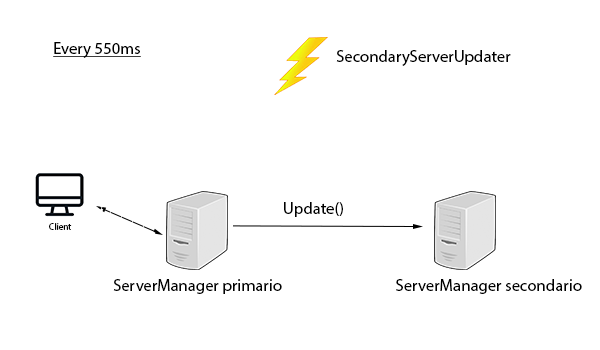
<style>
.page{position:relative;width:600px;height:350px;background:#ffffff}
.page>*{position:absolute;margin:0}
.t1{font:16.7px "MyriadPro-Regular";color:#000000;text-decoration:underline}
.t2{font:16.7px "MyriadPro-Regular";color:#000000}
.t3{font:9.1px "MyriadPro-Regular";color:#000000}
</style>
<div class="page">
<p class="t1" style="left:53px;top:42px;width:88px;height:16px">Every 550ms</p>
<p class="t2" style="left:336px;top:50px;width:175px;height:16px">SecondaryServerUpdater</p>
<p class="t2" style="left:284px;top:202px;width:59px;height:15px">Update()</p>
<p class="t3" style="left:49px;top:223px;width:23px;height:7px">Client</p>
<p class="t2" style="left:113px;top:279px;width:169px;height:15px">ServerManager primario</p>
<p class="t2" style="left:396px;top:279px;width:186px;height:15px">ServerManager secondario</p>
</div>
